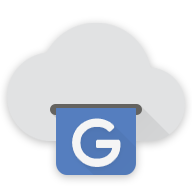
<style>
.page{position:relative;width:192px;height:192px;background:#ffffff}
.page>*{position:absolute;margin:0}
.t1{font:60.7px "ProductSans-Regular";color:#f5f5f5;scale:1.05 1}
</style>
<div class="page">
<p class="t1" style="left:73px;top:120px;width:47px;height:46px">G</p>
<p class="t1" style="left:73px;top:119px;width:47px;height:46px">G</p>
</div>
